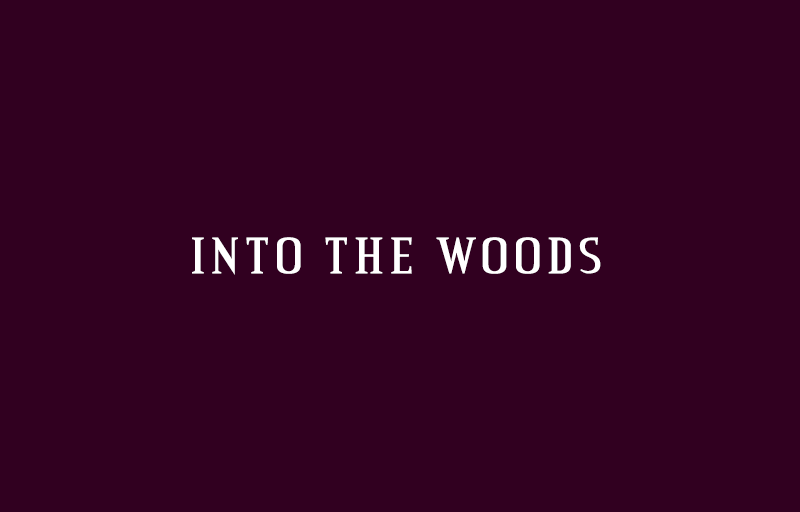
<style>
.page{position:relative;width:800px;height:512px;background:#310020}
.page>*{position:absolute;margin:0}
.t1{font:55.2px "CreditValley";letter-spacing:0.08em;color:#ffffff}
</style>
<div class="page">
<p class="t1" style="left:192px;top:237px;width:409px;height:38px">INTO THE WOODS</p>
</div>
